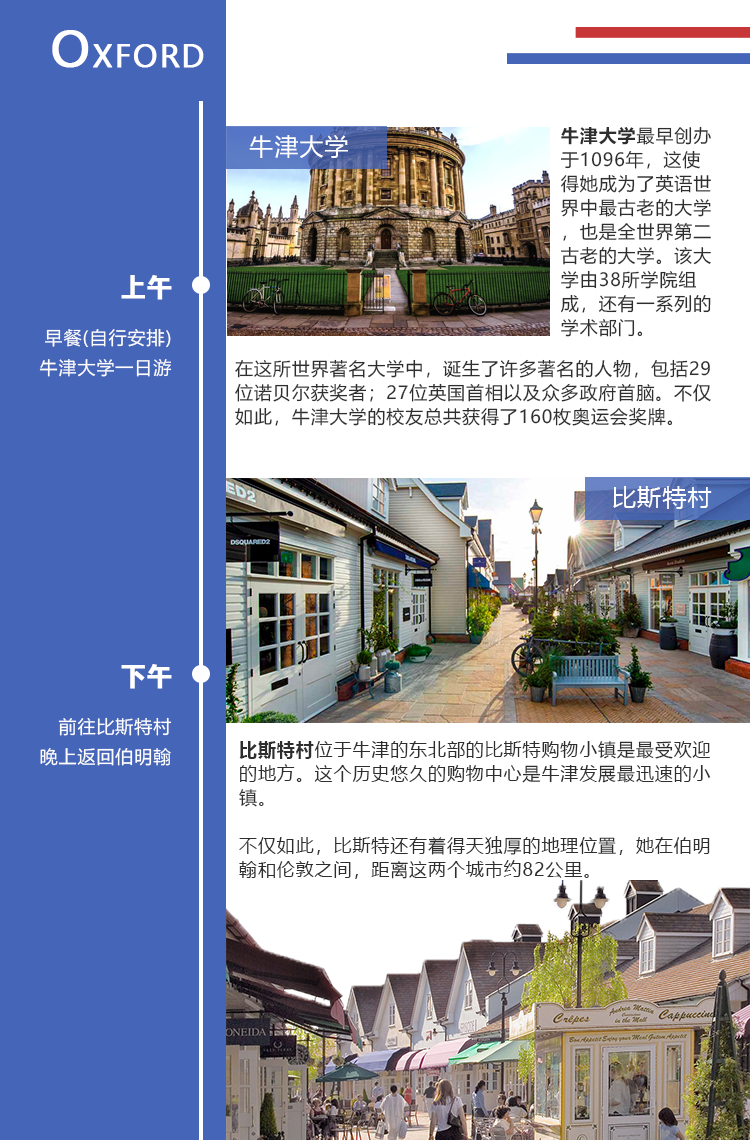
<style>
.page{position:relative;width:750px;height:1140px;background:#ffffff}
.page>*{position:absolute;margin:0}
.t1{font:30px "MicrosoftYaHei";letter-spacing:0.05em;color:#ffffff;font-weight:bold}
.t2{font:48px "MicrosoftYaHei";letter-spacing:0.05em;color:#ffffff;font-weight:bold}
.t3{font:18px/24px "MicrosoftYaHei";letter-spacing:0.05em;color:#2e2e2e}
.t4{font:18px/24px "MicrosoftYaHei-Bold";letter-spacing:0.05em;color:#2e2e2e}
.t5{font:24px "MicrosoftYaHei";letter-spacing:0.05em;color:#ffffff}
.t6{font:24px "MicrosoftYaHei-Bold";letter-spacing:0.05em;color:#ffffff;font-weight:bold}
.t7{font:18px/30px "MicrosoftYaHei";letter-spacing:0.05em;color:#ffffff}
.t8{font:18px/37.4px "MicrosoftYaHei";letter-spacing:0.05em;color:#ffffff}
</style>
<div class="page">
<p class="t1" style="left:52px;top:30px;width:152px;height:38px"><span class="t2">O</span>XFORD</p>
<p class="t3" style="left:561px;top:126px;width:150px;height:211px"><span class="t4">牛津大学</span>最早创办于1096年，这使得她成为了英语世界中最古老的大学，也是全世界第二古老的大学。该大学由38所学院组成，还有一系列的学术部门。</p>
<p class="t5" style="left:249px;top:135px;width:99px;height:23px">牛津大学</p>
<p class="t6" style="left:121px;top:275px;width:51px;height:25px">上午</p>
<p class="t7" style="left:39px;top:328px;width:133px;height:49px;text-align:right">早餐(自行安排)<br>牛津大学一日游</p>
<p class="t3" style="left:235px;top:359px;width:476px;height:67px">在这所世界著名大学中，诞生了许多著名的人物，包括29位诺贝尔获奖者；27位英国首相以及众多政府首脑。不仅如此，牛津大学的校友总共获得了160枚奥运会奖牌。</p>
<p class="t5" style="left:613px;top:486px;width:99px;height:23px">比斯特村</p>
<p class="t6" style="left:121px;top:664px;width:51px;height:25px">下午</p>
<p class="t8" style="left:40px;top:717px;width:132px;height:49px;text-align:right"><span class="t7">前往比斯特村<br></span>晚上返回伯明翰</p>
<p class="t3" style="left:239px;top:741px;width:472px;height:138px"><span class="t4">比斯特村</span>位于牛津的东北部的比斯特购物小镇是最受欢迎的地方。这个历史悠久的购物中心是牛津发展最迅速的小镇。<br><br>不仅如此，比斯特还有着得天独厚的地理位置，她在伯明翰和伦敦之间，距离这两个城市约82公里。</p>
</div>
